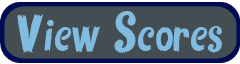
<style>
.page{position:relative;width:240px;height:64px;background:#444d52}
.page>*{position:absolute;margin:0}
.t1{font:89.6px "FantasticFont";color:#81bbe0}
</style>
<div class="page">
<p class="t1" style="left:17px;top:11px;width:205px;height:42px">View Scores</p>
</div>
